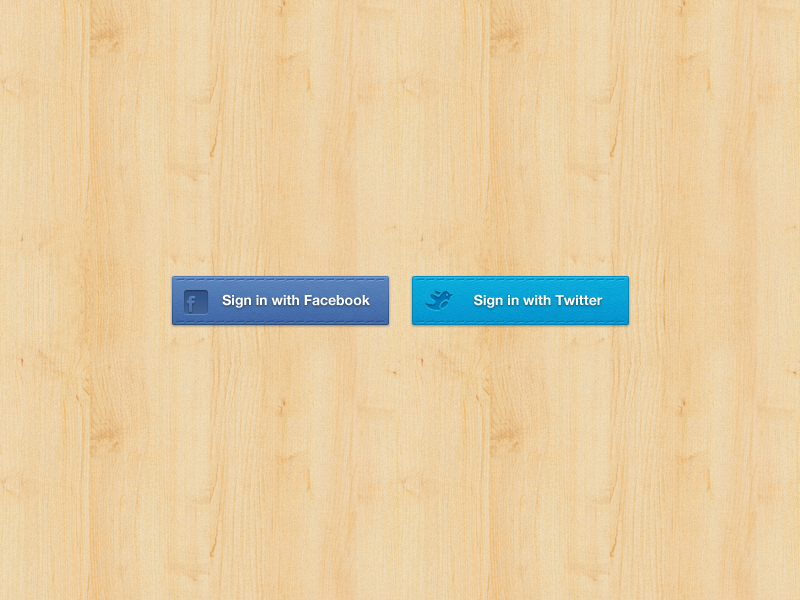
<style>
.page{position:relative;width:800px;height:600px}
.page>*{position:absolute;margin:0}
.t1{font:14px "HelveticaNeue-Bold";color:#ffffff}
</style>
<div class="page">
<p class="t1" style="left:222px;top:294px;width:148px;height:14px">Sign in with Facebook</p>
<p class="t1" style="left:474px;top:294px;width:129px;height:14px">Sign in with Twitter</p>
</div>
